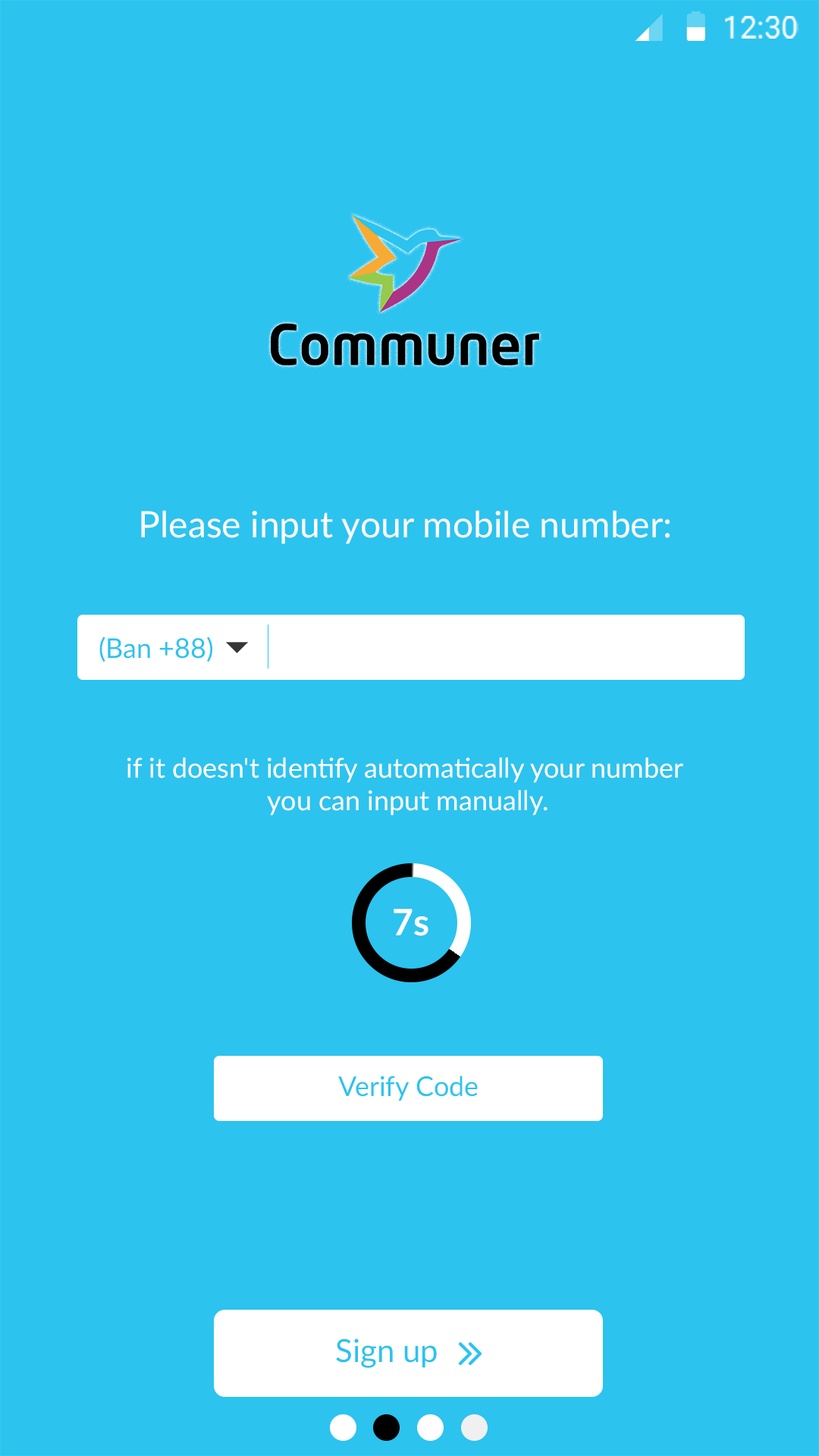
<style>
.page{position:relative;width:819px;height:1456px;background:#2cc3ef}
.page>*{position:absolute;margin:0}
.t1{font:30.3px "Roboto-Regular";color:#ffffff}
.t2{font:36.4px "Lato-Regular";color:#fefefe}
.t3{font:27.3px "Lato-Regular";color:#2cc3ef}
.t4{font:27.3px "Lato-Regular";color:#ffffff}
.t5{font:36.4px "Lato-Bold";color:#ffffff}
.t6{font:31.8px "Lato-Regular";color:#2cc3ef}
</style>
<div class="page">
<p class="t1" style="left:725px;top:16px;width:73px;height:23px">12:30</p>
<p class="t2" style="left:141px;top:510px;width:528px;height:34px">Please input your mobile number:</p>
<p class="t3" style="left:99px;top:637px;width:113px;height:26px">(Ban +88)</p>
<p class="t4" style="left:127px;top:757px;width:556px;height:59px;text-align:center">if it doesn't identify automatically your number <br>you can input manually.</p>
<p class="t5" style="left:393px;top:909px;width:35px;height:27px">7s</p>
<p class="t3" style="left:338px;top:1076px;width:140px;height:26px">Verify Code</p>
<p class="t6" style="left:336px;top:1339px;width:101px;height:29px">Sign up</p>
</div>
